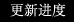
<style>
.page{position:relative;width:74px;height:22px;background:#000000}
.page>*{position:absolute;margin:0}
.t1{font:14px "SimSun";color:#ffffff}
</style>
<div class="page">
<p class="t1" style="left:10px;top:3px;width:56px;height:14px">更新进度</p>
</div>
